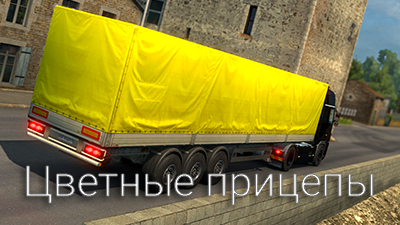
<style>
.page{position:relative;width:400px;height:225px}
.page>*{position:absolute;margin:0}
.t1{font:42px "Roboto-Light"}
</style>
<div class="page">
<p class="t1" style="left:26px;top:166px;width:347px;height:39px">Цветные прицепы</p>
</div>
